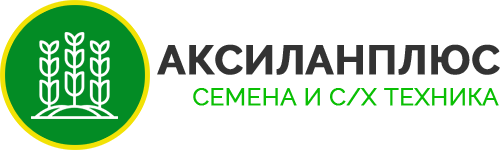
<style>
.page{position:relative;width:500px;height:150px;background:#ffffff}
.page>*{position:absolute;margin:0}
.t1{font:41.1px "Raleway-Bold";color:#333333;text-transform:uppercase;font-weight:bold}
.t2{font:23.9px "Raleway-Regular";color:#0abf04;text-transform:uppercase;font-weight:bold}
</style>
<div class="page">
<p class="t1" style="left:157px;top:44px;width:343px;height:31px">АксиЛанПлюс</p>
<p class="t2" style="left:193px;top:88px;width:306px;height:18px">Семена и с/х техника</p>
</div>
